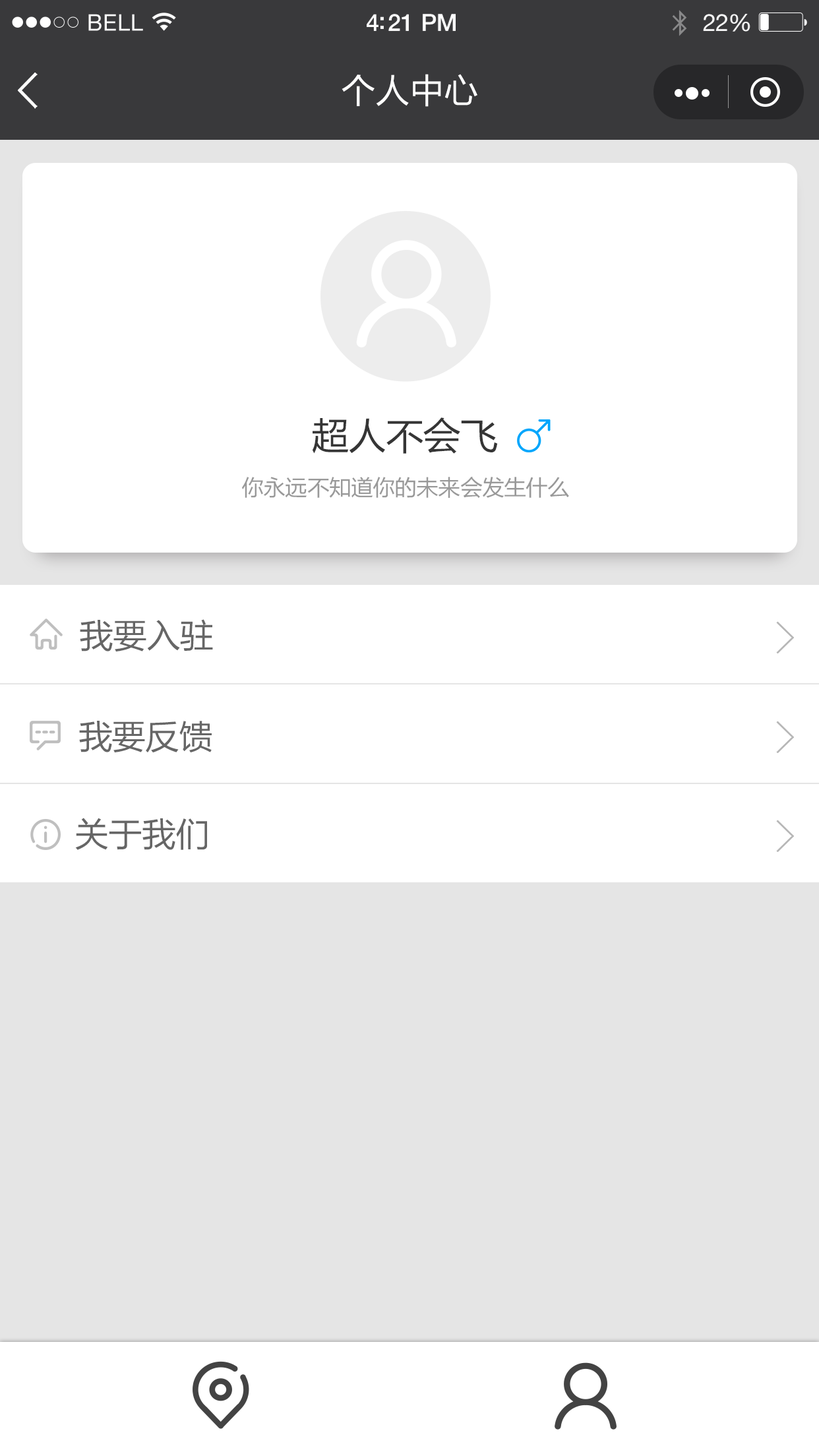
<style>
.page{position:relative;width:819px;height:1456px;background:#ffffff}
.page>*{position:absolute;margin:0}
.t1{font:34.3px "FZLTHJW--GB1-0";color:#ffffff}
.t2{font:38.2px "FZLTHJW--GB1-0";letter-spacing:-0.025em;color:#353535}
.t3{font:22.4px "FZLTHJW--GB1-0";letter-spacing:-0.025em;color:#999999}
.t4{font:34.3px "FZLTHJW--GB1-0";letter-spacing:-0.025em;color:#666666}
</style>
<div class="page">
<p class="t1" style="left:342px;top:74px;width:135px;height:33px">个人中心</p>
<p class="t2" style="left:312px;top:417px;width:186px;height:37px">超人不会飞</p>
<p class="t3" style="left:242px;top:477px;width:327px;height:21px">你永远不知道你的未来会发生什么</p>
<p class="t4" style="left:80px;top:619px;width:133px;height:32px">我要入驻</p>
<p class="t4" style="left:79px;top:721px;width:133px;height:31px">我要反馈</p>
<p class="t4" style="left:75px;top:818px;width:132px;height:32px">关于我们</p>
</div>
